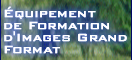
<style>
.page{position:relative;width:132px;height:60px}
.page>*{position:absolute;margin:0}
.t1{font:14px/12px "BankGothicBT-Medium";color:#ffffff;font-weight:bold}
</style>
<div class="page">
<p class="t1" style="left:4px;top:6px;width:123px;height:48px">Équipement<br>de Formation<br>d'Images Grand<br>Format</p>
<p class="t1" style="left:4px;top:6px;width:123px;height:48px">Équipement<br>de Formation<br>d'Images Grand<br>Format</p>
</div>
